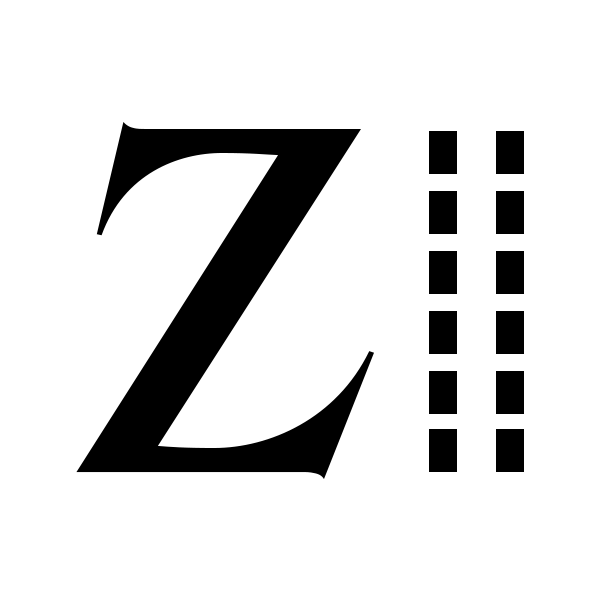
<style>
.page{position:relative;width:600px;height:600px;background:#ffffff}
.page>*{position:absolute;margin:0}
.t1{font:520.8px "BenguiatProITC-Book";color:#000000;text-transform:uppercase}
</style>
<div class="page">
<p class="t1" style="left:76px;top:122px;width:298px;height:357px">Z</p>
</div>
